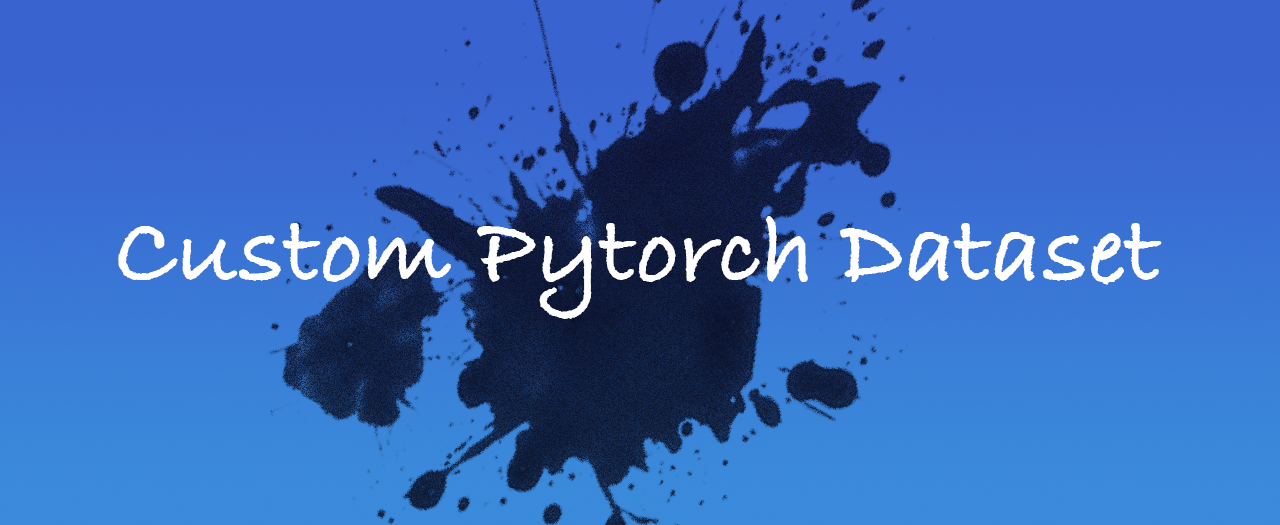
<style>
.page{position:relative;width:1280px;height:525px}
.page>*{position:absolute;margin:0}
.t1{font:100px "BradleyHandITCTT-Bold";color:#ffffff}
</style>
<div class="page">
<p class="t1" style="left:118px;top:216px;width:1044px;height:103px">Custom Pytorch Dataset</p>
</div>
